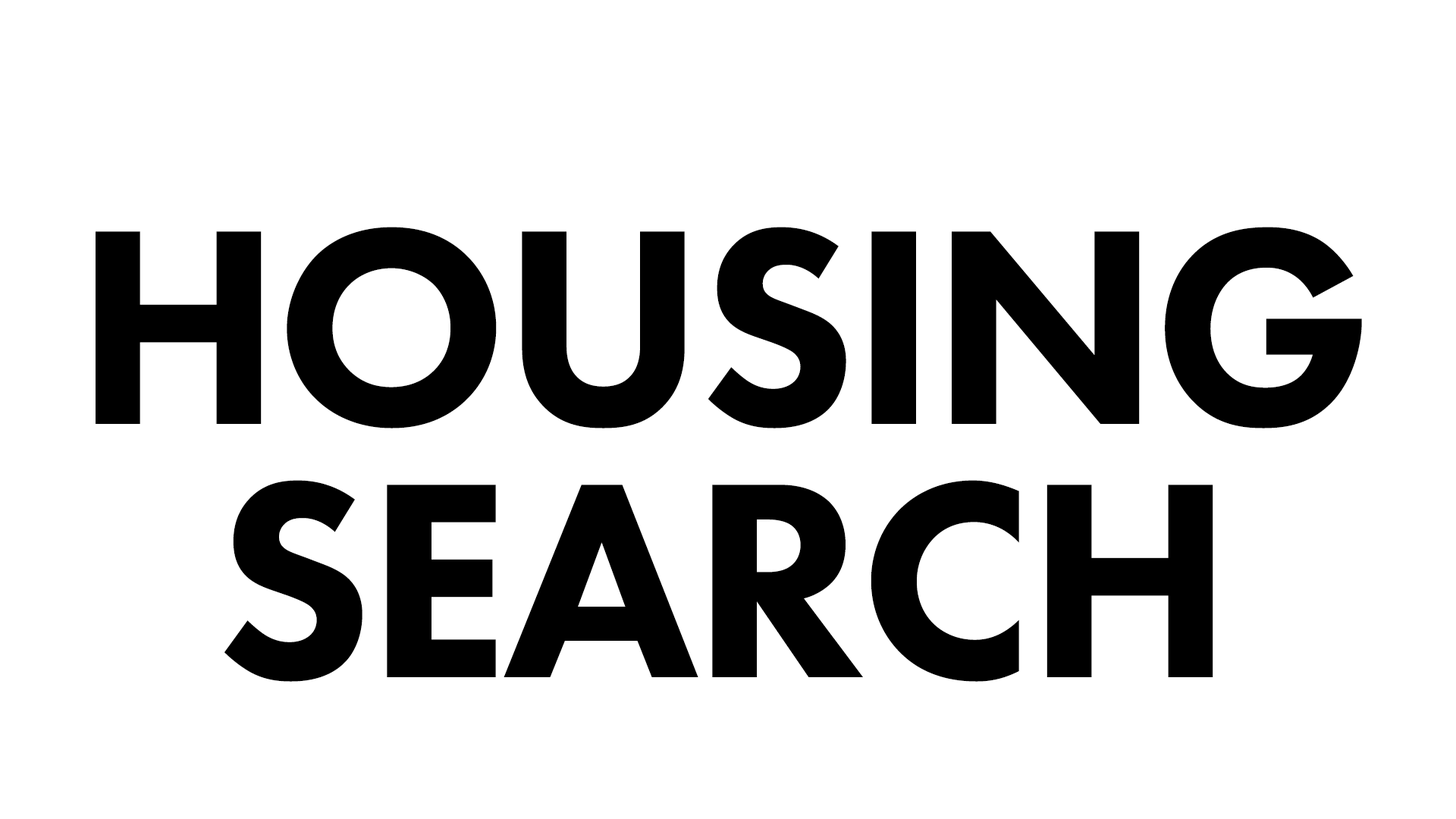
<style>
.page{position:relative;width:1456px;height:819px;background:#ffffff}
.page>*{position:absolute;margin:0}
.t1{font:288.2px/253.3px "FuturaPT-Heavy";letter-spacing:-0.025em;color:#000000}
</style>
<div class="page">
<p class="t1" style="left:96px;top:227px;width:1266px;height:455px;text-align:center">HOUSING<br>SEARCH</p>
</div>
